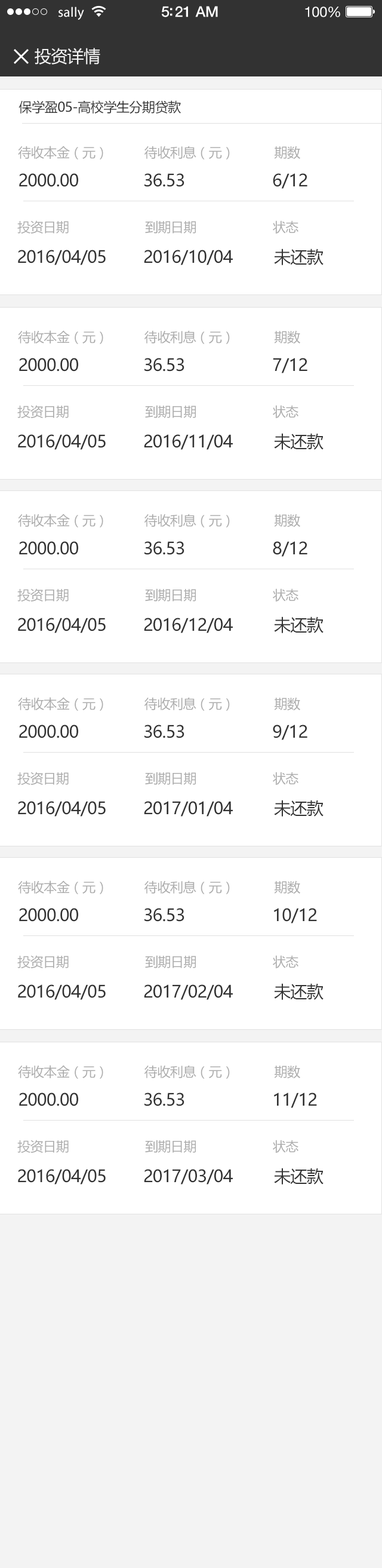
<style>
.page{position:relative;width:382px;height:1568px;background:#ffffff}
.page>*{position:absolute;margin:0}
.t1{font:14.9px "HelveticaNeue-Medium";letter-spacing:-0.02em;color:#ffffff}
.t2{font:13.7px "MyriadPro-Regular";letter-spacing:0.02em;color:#ffffff}
.t3{font:14.3px "HelveticaNeue";letter-spacing:-0.02em;color:#ffffff}
.t4{font:16.7px "MicrosoftYaHei";letter-spacing:-0.02em;color:#f3f3f3}
.t5{font:13.1px "MicrosoftYaHei";letter-spacing:-0.02em;color:#323232}
.t6{font:13.1px "MicrosoftYaHei";letter-spacing:-0.02em;color:#acacac}
.t7{font:16.7px "MicrosoftYaHei";letter-spacing:-0.02em;color:#323232}
</style>
<div class="page">
<p class="t1" style="left:162px;top:6px;width:56px;height:11px">5:21 AM</p>
<p class="t2" style="left:59px;top:7px;width:25px;height:13px">sally</p>
<p class="t3" style="left:305px;top:7px;width:35px;height:10px">100%</p>
<p class="t4" style="left:35px;top:48px;width:65px;height:17px">投资详情</p>
<p class="t5" style="left:19px;top:100px;width:162px;height:14px">保学盈05-高校学生分期贷款</p>
<p class="t6" style="left:18px;top:146px;width:282px;height:13px">待收本金（元）          待收利息（元）           期数</p>
<p class="t7" style="left:19px;top:173px;width:289px;height:16px">2000.00              36.53                   6/12</p>
<p class="t6" style="left:17px;top:220px;width:282px;height:14px">投资日期                     到期日期                     状态</p>
<p class="t7" style="left:18px;top:248px;width:306px;height:17px">2016/04/05        2016/10/04         未还款</p>
<p class="t6" style="left:18px;top:330px;width:282px;height:14px">待收本金（元）          待收利息（元）           期数</p>
<p class="t7" style="left:19px;top:358px;width:289px;height:15px">2000.00              36.53                   7/12</p>
<p class="t6" style="left:17px;top:405px;width:282px;height:13px">投资日期                     到期日期                     状态</p>
<p class="t7" style="left:18px;top:433px;width:306px;height:17px">2016/04/05        2016/11/04         未还款</p>
<p class="t6" style="left:18px;top:514px;width:282px;height:13px">待收本金（元）          待收利息（元）           期数</p>
<p class="t7" style="left:19px;top:541px;width:289px;height:16px">2000.00              36.53                   8/12</p>
<p class="t6" style="left:17px;top:588px;width:282px;height:14px">投资日期                     到期日期                     状态</p>
<p class="t7" style="left:18px;top:616px;width:306px;height:17px">2016/04/05        2016/12/04         未还款</p>
<p class="t6" style="left:18px;top:697px;width:282px;height:14px">待收本金（元）          待收利息（元）           期数</p>
<p class="t7" style="left:19px;top:725px;width:289px;height:15px">2000.00              36.53                   9/12</p>
<p class="t6" style="left:17px;top:772px;width:282px;height:13px">投资日期                     到期日期                     状态</p>
<p class="t7" style="left:18px;top:800px;width:306px;height:17px">2016/04/05        2017/01/04         未还款</p>
<p class="t6" style="left:18px;top:880px;width:282px;height:14px">待收本金（元）          待收利息（元）           期数</p>
<p class="t7" style="left:19px;top:908px;width:298px;height:15px">2000.00              36.53                   10/12</p>
<p class="t6" style="left:17px;top:955px;width:282px;height:13px">投资日期                     到期日期                     状态</p>
<p class="t7" style="left:18px;top:983px;width:306px;height:17px">2016/04/05        2017/02/04         未还款</p>
<p class="t6" style="left:18px;top:1065px;width:282px;height:14px">待收本金（元）          待收利息（元）           期数</p>
<p class="t7" style="left:19px;top:1093px;width:298px;height:15px">2000.00              36.53                   11/12</p>
<p class="t6" style="left:17px;top:1140px;width:282px;height:13px">投资日期                     到期日期                     状态</p>
<p class="t7" style="left:18px;top:1168px;width:306px;height:17px">2016/04/05        2017/03/04         未还款</p>
</div>
